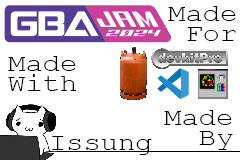
<style>
.page{position:relative;width:240px;height:160px;background:#ffffff}
.page>*{position:absolute;margin:0}
.t1{font:24px/20px "CourierNewPSMT";color:#000000;scale:1.2 1}
.t2{font:24px/20px "CourierNewPSMT";color:#010000;scale:1.2 1}
.t3{font:24px "CourierNewPSMT";color:#010000;scale:1.2 1}
</style>
<div class="page">
<p class="t1" style="left:168px;top:6px;width:68px;height:35px;text-align:right">Made<br>For</p>
<p class="t1" style="left:8px;top:56px;width:69px;height:35px">Made<br>With</p>
<p class="t2" style="left:164px;top:110px;width:69px;height:40px;text-align:right">Made<br>By</p>
<p class="t3" style="left:52px;top:136px;width:100px;height:19px">Issung</p>
</div>
